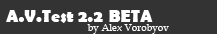
<style>
.page{position:relative;width:217px;height:34px;background:#333333}
.page>*{position:absolute;margin:0}
.t1{font:17px "BerlinSansFB-Bold";color:#ffffff}
.t2{font:10px "BookAntiqua";color:#ffffff}
</style>
<div class="page">
<p class="t1" style="left:93px;top:12px;width:10px;height:10px">2</p>
<p class="t2" style="left:87px;top:24px;width:82px;height:10px">by Alex Vorobyov</p>
</div>
